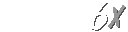
<style>
.page{position:relative;width:128px;height:32px;background:#ffffff}
.page>*{position:absolute;margin:0}
.t1{font:42.9px "DomDiagonalBT-Regular";letter-spacing:0.075em;color:#ffffff;scale:1.05 1}
.t2{font:29.7px "DomDiagonalBT-Regular";letter-spacing:0.075em;color:#969696}
.t3{font:29.7px "DomDiagonalBT-Regular";letter-spacing:0.075em}
</style>
<div class="page">
<p class="t1" style="left:90px;top:2px;width:18px;height:29px">6</p>
<p class="t2" style="left:108px;top:5px;width:17px;height:23px">X</p>
<p class="t3" style="left:109px;top:6px;width:17px;height:23px">X</p>
</div>
